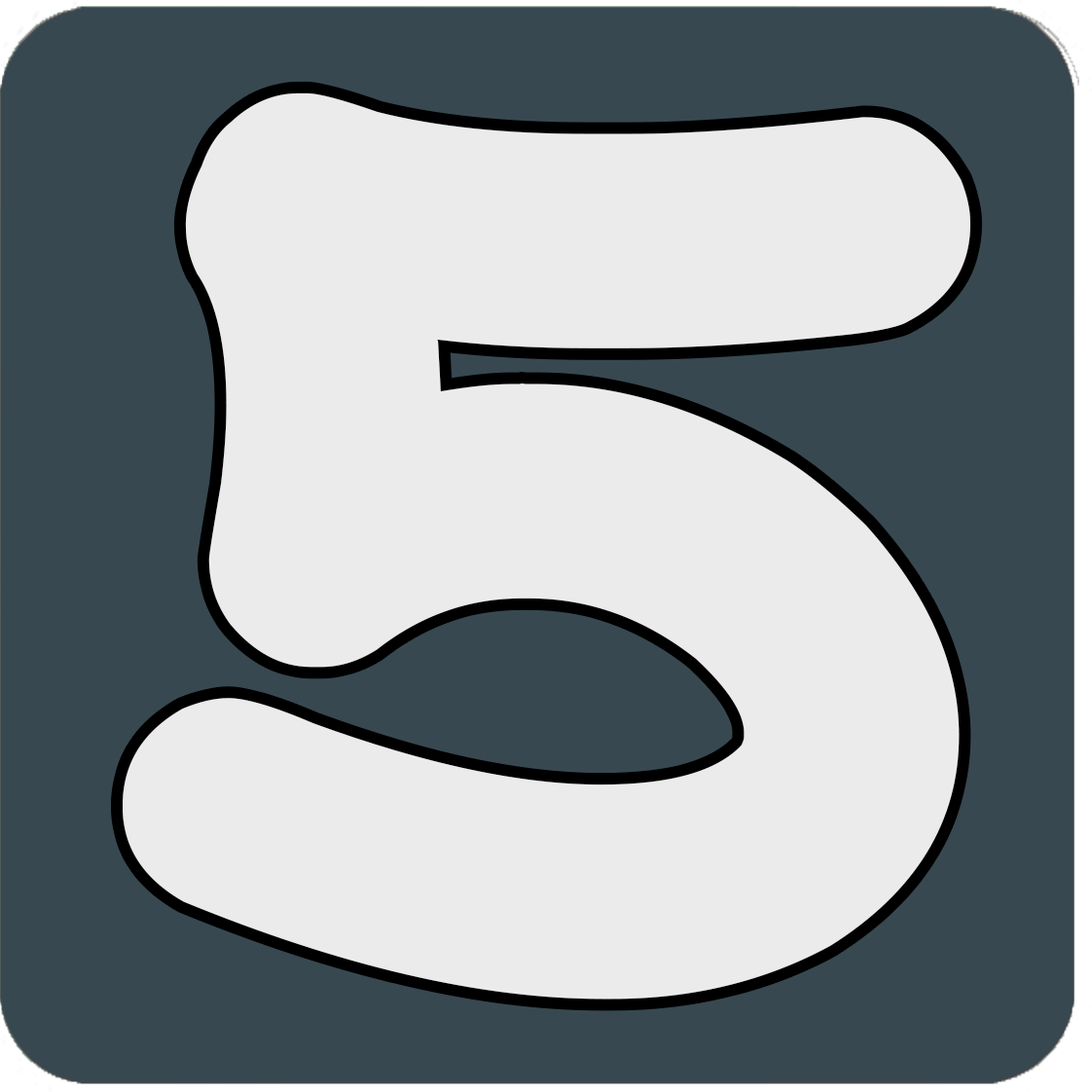
<style>
.page{position:relative;width:1092px;height:1092px;background:#374850}
.page>*{position:absolute;margin:0}
.t1{font:1362.5px "CARTOONIC";color:#ebebeb}
</style>
<div class="page">
<p class="t1" style="left:123px;top:92px;width:847px;height:908px">5</p>
</div>
